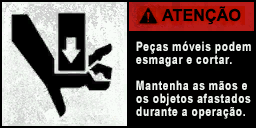
<style>
.page{position:relative;width:256px;height:128px;background:#000000}
.page>*{position:absolute;margin:0}
.t1{font:16.4px "Arial-BoldMT";color:#000000;text-transform:uppercase}
.t2{font:13px/13px "Arial-BoldMT";letter-spacing:0.05em;color:#f0f4f0;scale:0.8 1}
</style>
<div class="page">
<p class="t1" style="left:162px;top:6px;width:79px;height:19px">atenção</p>
<p class="t2" style="left:136px;top:41px;width:115px;height:26px">Peças móveis podem<br>esmagar e cortar.</p>
<p class="t2" style="left:136px;top:80px;width:115px;height:39px">Mantenha as mãos e<br>os objetos afastados<br>durante a operação.</p>
</div>
